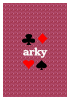
<style>
.page{position:relative;width:70px;height:100px}
.page>*{position:absolute;margin:0}
.t1{font:11.1px "SitkaBanner";color:#ffffff;font-weight:bold;scale:1.19 1}
</style>
<div class="page">
<p class="t1" style="left:23px;top:47px;width:25px;height:11px">arky</p>
</div>
